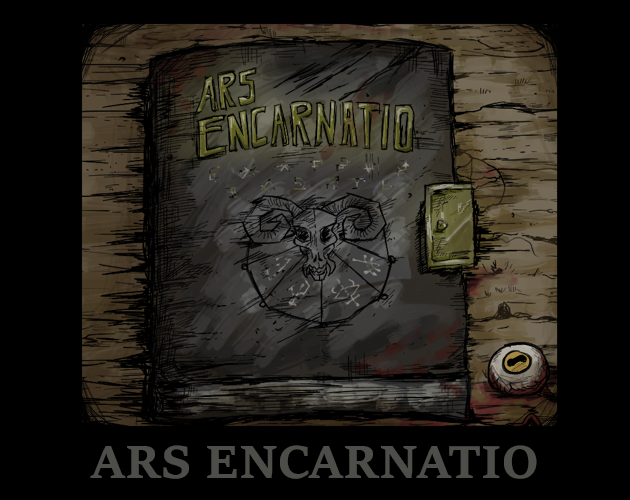
<style>
.page{position:relative;width:630px;height:500px;background:#000000}
.page>*{position:absolute;margin:0}
.t1{font:50px "Sitka-TextBold";color:#4d4d49}
</style>
<div class="page">
<p class="t1" style="left:90px;top:445px;width:447px;height:34px">ARS ENCARNATIO</p>
</div>
